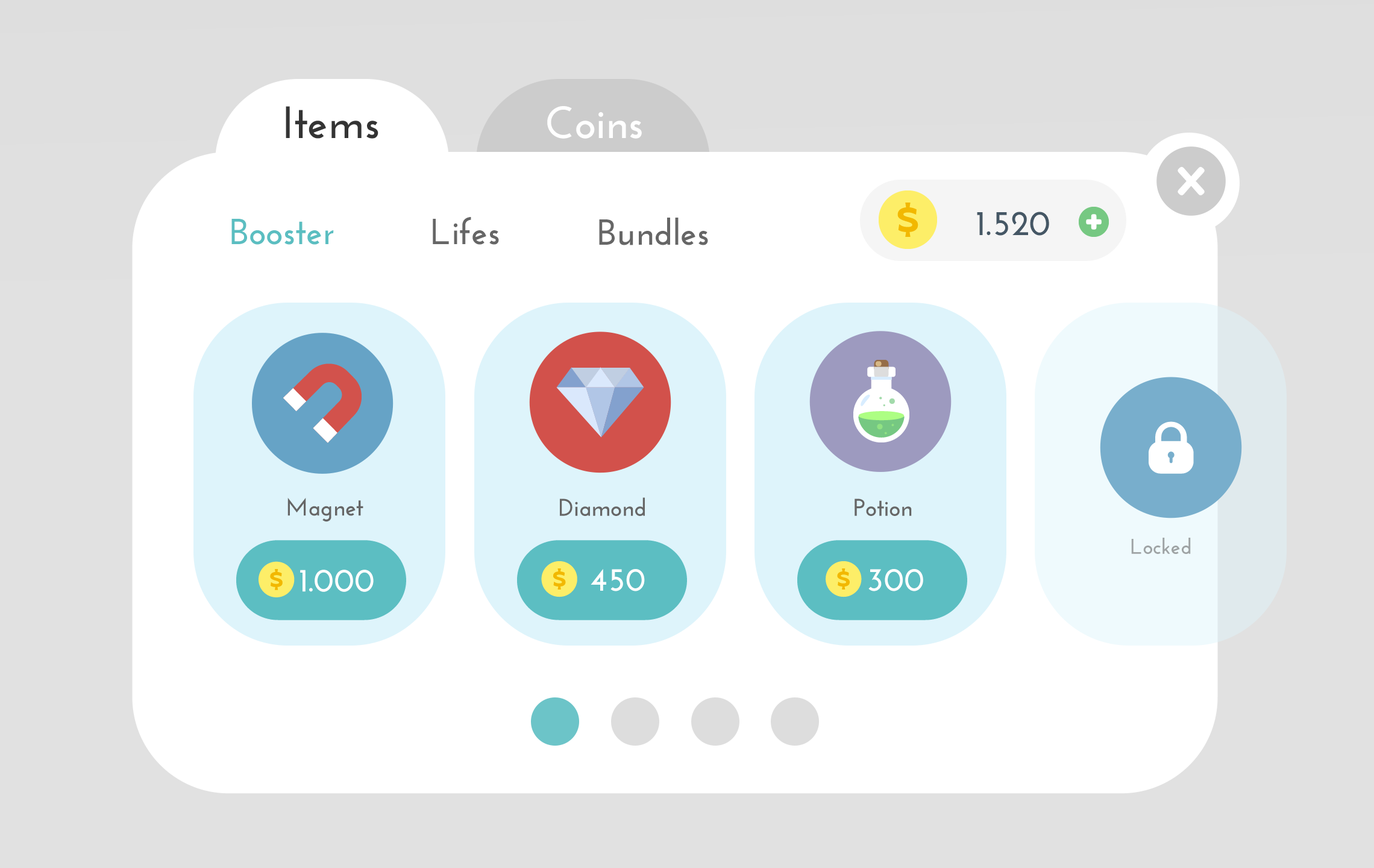
<style>
.page{position:relative;width:1374px;height:868px;background:#ffffff}
.page>*{position:absolute;margin:0}
.t1{font:45.2px "JosefinSans-Bold";color:#333333}
.t2{font:45.2px "JosefinSans-Bold";color:#ffffff}
.t3{font:36.2px "JosefinSans-Bold";color:#5bbec1}
.t4{font:36.2px "JosefinSans-Bold";color:#666666}
.t5{font:35.2px "JosefinSans-Bold";color:#455765}
.t6{font:24.2px "JosefinSans-Bold";color:#666666}
.t7{font:21.3px "JosefinSans-Bold";color:#9ea3a4}
.t8{font:32.9px "JosefinSans-Bold";color:#ffffff}
</style>
<div class="page">
<p class="t1" style="left:286px;top:106px;width:92px;height:33px">Items</p>
<p class="t2" style="left:547px;top:106px;width:95px;height:33px">Coins</p>
<p class="t3" style="left:231px;top:219px;width:103px;height:26px">Booster</p>
<p class="t4" style="left:433px;top:217px;width:66px;height:28px">Lifes</p>
<p class="t4" style="left:599px;top:218px;width:109px;height:27px">Bundles</p>
<p class="t5" style="left:977px;top:212px;width:72px;height:24px">1.520</p>
<p class="t6" style="left:287px;top:497px;width:76px;height:25px">Magnet</p>
<p class="t6" style="left:560px;top:497px;width:85px;height:19px">Diamond</p>
<p class="t6" style="left:855px;top:498px;width:57px;height:18px">Potion</p>
<p class="t7" style="left:1131px;top:538px;width:60px;height:16px">Locked</p>
<p class="t8" style="left:300px;top:570px;width:74px;height:22px">1.000</p>
<p class="t8" style="left:591px;top:569px;width:54px;height:22px">450</p>
<p class="t8" style="left:868px;top:569px;width:55px;height:22px">300</p>
</div>
